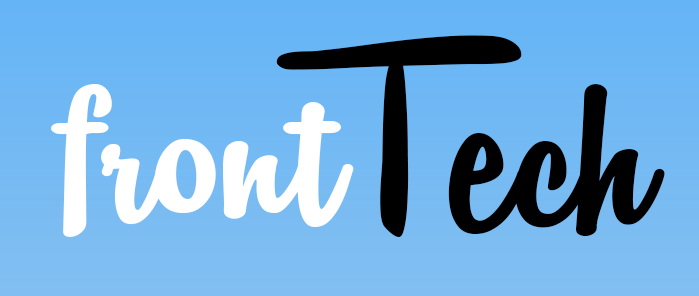
<style>
.page{position:relative;width:699px;height:296px}
.page>*{position:absolute;margin:0}
.t1{font:300px "RemachineScriptPersonalUse";color:#000000}
.t2{font:300px "RemachineScriptPersonalUse";color:#ffffff}
</style>
<div class="page">
<p class="t1" style="left:276px;top:35px;width:389px;height:202px">Tech</p>
<p class="t2" style="left:51px;top:84px;width:303px;height:153px">front</p>
</div>
